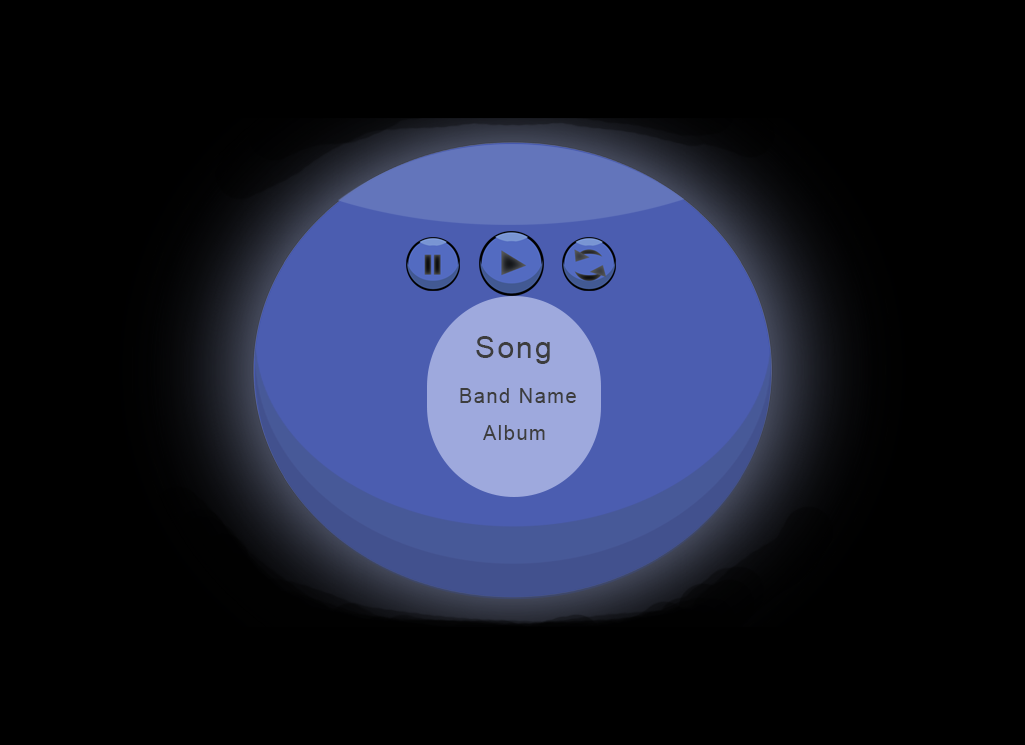
<style>
.page{position:relative;width:1025px;height:745px;background:#000000}
.page>*{position:absolute;margin:0}
.t1{font:30px "ArialMT";letter-spacing:0.075em;color:#3d3d3d}
.t2{font:20px "ArialMT";letter-spacing:0.075em;color:#3d3d3d}
</style>
<div class="page">
<p class="t1" style="left:476px;top:336px;width:74px;height:28px">Song</p>
<p class="t2" style="left:460px;top:388px;width:116px;height:15px">Band Name</p>
<p class="t2" style="left:483px;top:425px;width:62px;height:15px">Album</p>
</div>
